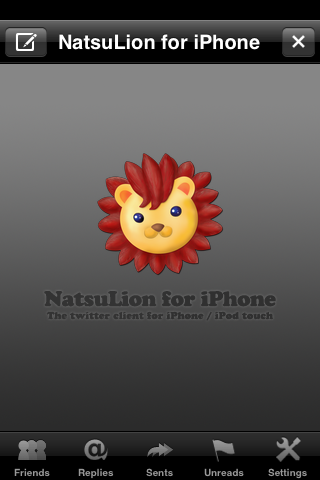
<style>
.page{position:relative;width:320px;height:480px}
.page>*{position:absolute;margin:0}
.t1{font:21px "CooperBlackStd";letter-spacing:-0.025em;color:#343434}
.t2{font:10px "CooperBlackStd";color:#343434}
</style>
<div class="page">
<p class="t1" style="left:44px;top:291px;width:232px;height:16px">NatsuLion for iPhone</p>
<p class="t2" style="left:46px;top:311px;width:227px;height:10px">The twitter client for iPhone / iPod touch</p>
</div>
